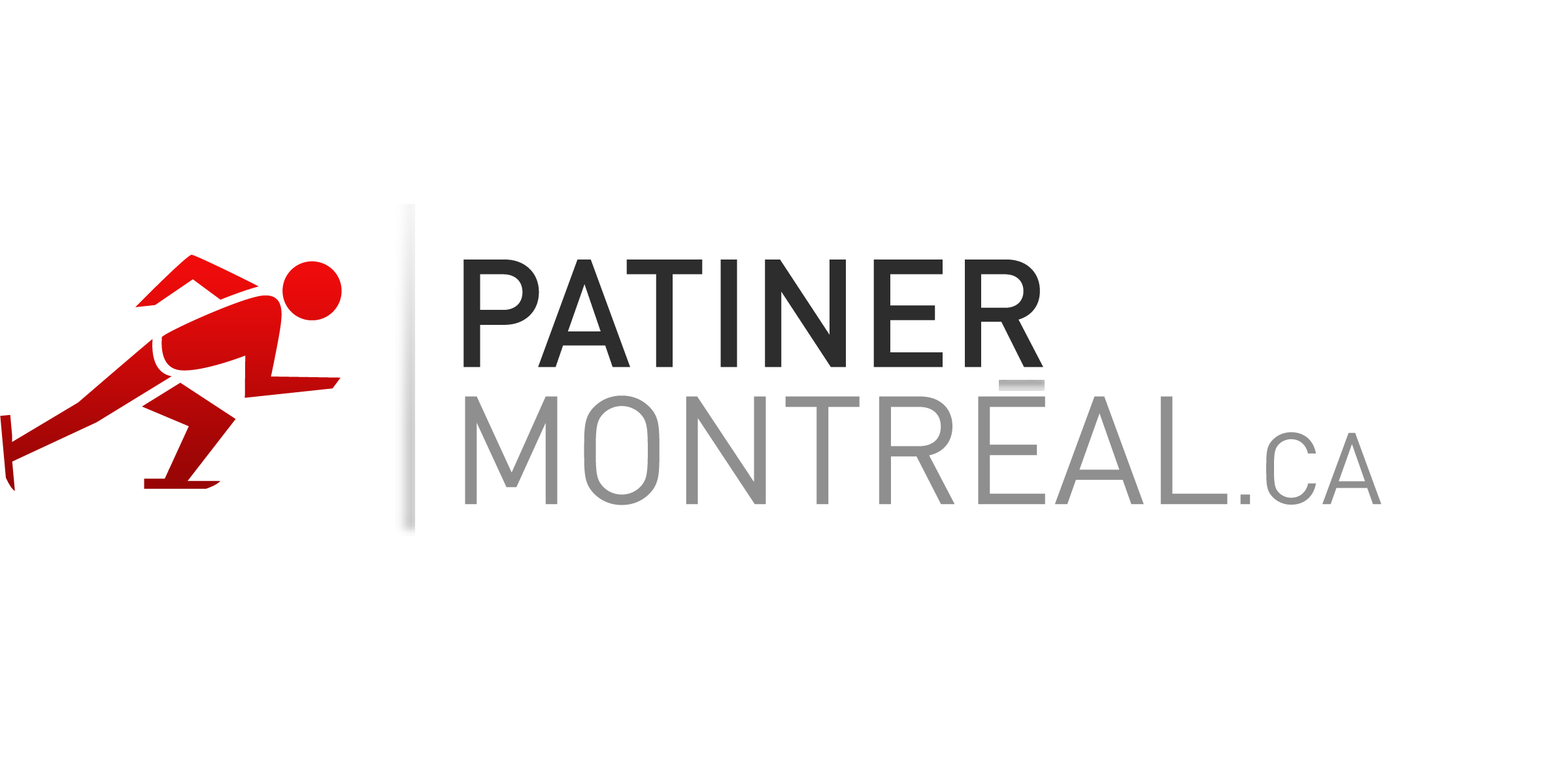
<style>
.page{position:relative;width:1544px;height:772px;background:#ffffff}
.page>*{position:absolute;margin:0}
.t1{font:150.9px/137px "DIN-Regular";color:#908f8f;text-transform:uppercase}
.t2{font:150.9px/137px "DIN-Medium";color:#2e2d2d;text-transform:uppercase}
.t3{font:99.9px/137px "DIN-Regular";color:#908f8f;text-transform:uppercase}
</style>
<div class="page">
<p class="t1" style="left:464px;top:260px;width:918px;height:245px"><span class="t2">patiner <br></span>montreal<span class="t3">.CA</span></p>
</div>
